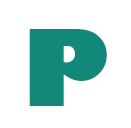
<style>
.page{position:relative;width:131px;height:128px;background:#ffffff}
.page>*{position:absolute;margin:0}
.t1{font:103px "GillSans-UltraBold";color:#12887a}
</style>
<div class="page">
<p class="t1" style="left:29px;top:29px;width:78px;height:77px">P</p>
</div>
